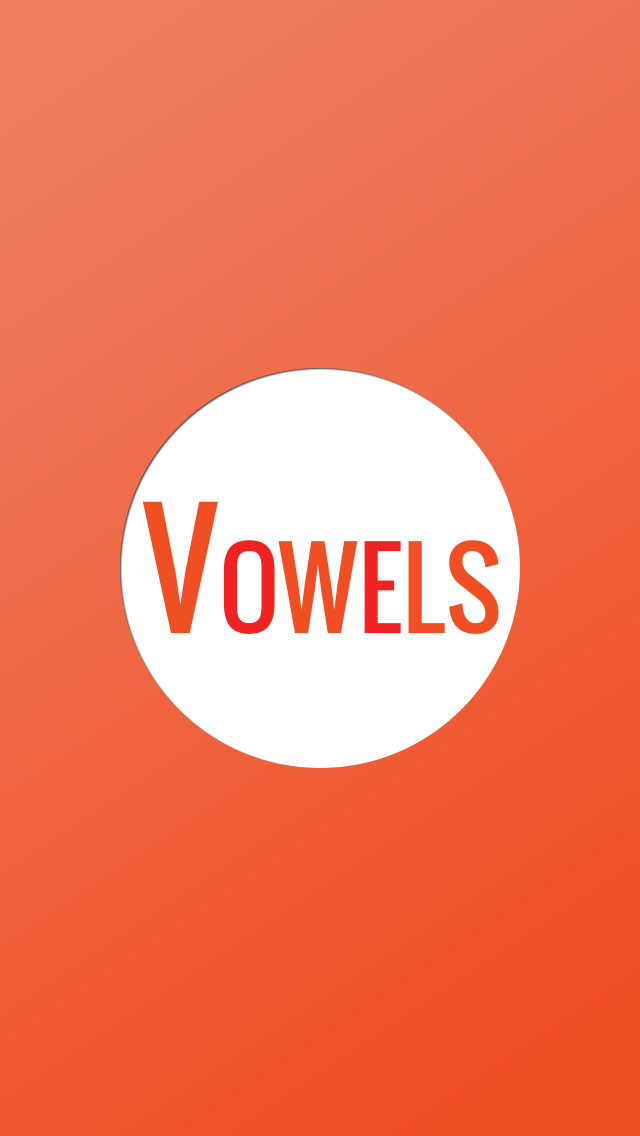
<style>
.page{position:relative;width:640px;height:1136px}
.page>*{position:absolute;margin:0}
.t1{font:150px "Oswald";color:#f04e23;font-variant:small-caps}
.t2{font:150px "Oswald";color:#f02323;font-variant:small-caps}
</style>
<div class="page">
<p class="t1" style="left:142px;top:501px;width:357px;height:133px">V<span class="t2">o</span>w<span class="t2">e</span>ls</p>
</div>
